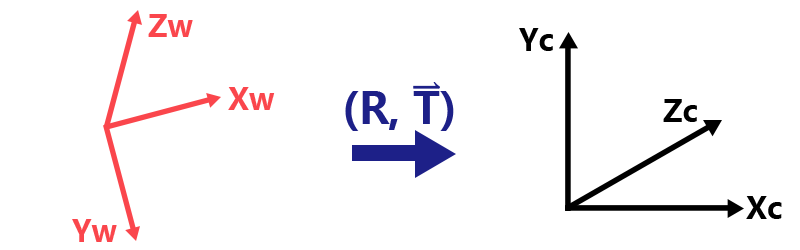
<style>
.page{position:relative;width:800px;height:250px;background:#ffffff}
.page>*{position:absolute;margin:0}
.t1{font:30px "MicrosoftYaHei-Bold";color:#fa464c}
.t2{font:30px "MicrosoftYaHei-Bold";color:#000000}
.t3{font:42.6px "MicrosoftYaHei-Bold";color:#1d2088}
</style>
<div class="page">
<p class="t1" style="left:148px;top:14px;width:45px;height:23px">Zw</p>
<p class="t2" style="left:519px;top:28px;width:34px;height:23px">Yc</p>
<p class="t1" style="left:228px;top:87px;width:47px;height:23px">Xw</p>
<p class="t3" style="left:345px;top:91px;width:109px;height:40px">(R, T)</p>
<p class="t2" style="left:663px;top:99px;width:34px;height:23px">Zc</p>
<p class="t2" style="left:746px;top:196px;width:36px;height:23px">Xc</p>
<p class="t1" style="left:72px;top:219px;width:45px;height:23px">Yw</p>
</div>
